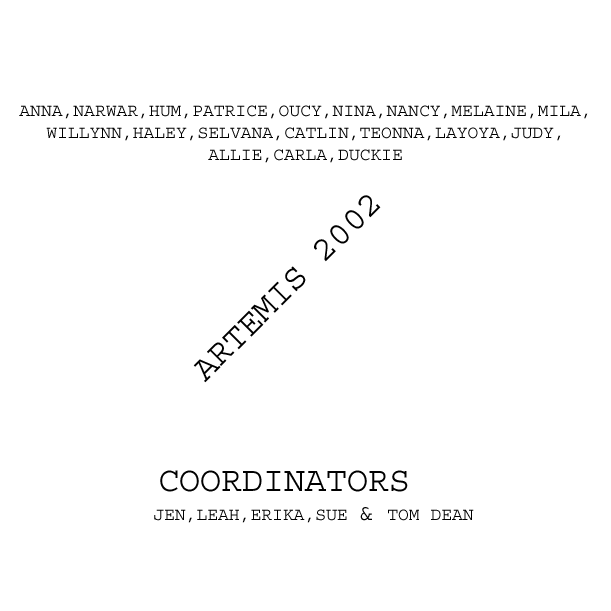
<style>
.page{position:relative;width:611px;height:611px;background:#ffffff}
.page>*{position:absolute;margin:0}
.t1{font:18px "Courier";color:#000000}
.t2{font:35px "Courier";color:#000000}
.t3{font:24px "Courier";color:#000000}
.t4{font:36px "Courier";color:#000000}
</style>
<div class="page">
<p class="t1" style="left:19px;top:105px;width:569px;height:58px;text-align:center">ANNA,NARWAR,HUM,PATRICE,OUCY,NINA,NANCY,MELAINE,MILA,WILLYNN,HALEY,SELVANA,CATLIN,TEONNA,LAYOYA,JUDY,ALLIE,CARLA,DUCKIE</p>
<p class="t2" style="left:193px;top:195px;width:188px;height:188px;rotate:-45deg">ARTEMIS 2002</p>
<p class="t1" style="left:154px;top:470px;width:320px;height:53px"><span class="t2">      COORDINATORS<br></span> JEN,LEAH,ERIKA,SUE <span class="t3">&amp; </span>TOM DEAN<br><br><br>                                <br>   <br>JEN<br> JEN,LEAH,ERIKA,SUE <span class="t4">&amp;</span></p>
</div>
